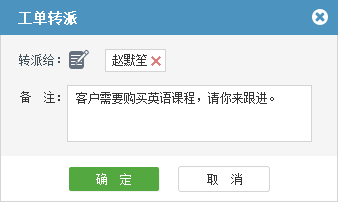
<style>
.page{position:relative;width:338px;height:202px;background:#ffffff}
.page>*{position:absolute;margin:0}
.t1{font:14px "SimSun";color:#ffffff;font-weight:bold}
.t2{font:12px "SimSun";color:#41515a}
.t3{font:13px "SimSun";color:#41515a}
.t4{font:12px "SimSun";color:#333333}
.t5{font:12px "SimSun";color:#ffffff}
</style>
<div class="page">
<p class="t1" style="left:18px;top:11px;width:59px;height:14px">工单转派</p>
<p class="t2" style="left:19px;top:54px;width:41px;height:12px">转派给<span class="t3">：</span></p>
<p class="t4" style="left:112px;top:54px;width:35px;height:12px">赵默笙</p>
<p class="t4" style="left:20px;top:91px;width:40px;height:12px">备　注：</p>
<p class="t4" style="left:76px;top:92px;width:198px;height:12px">客户需要购买英语课程，请你来跟进。</p>
<p class="t5" style="left:96px;top:173px;width:35px;height:12px">确  定</p>
<p class="t4" style="left:207px;top:173px;width:35px;height:12px">取  消</p>
</div>
